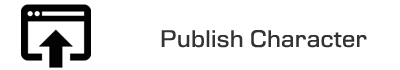
<style>
.page{position:relative;width:400px;height:70px;background:#ffffff}
.page>*{position:absolute;margin:0}
.t1{font:23px "Moire";color:#333333}
</style>
<div class="page">
<p class="t1" style="left:161px;top:30px;width:206px;height:18px">Publish Character</p>
</div>
